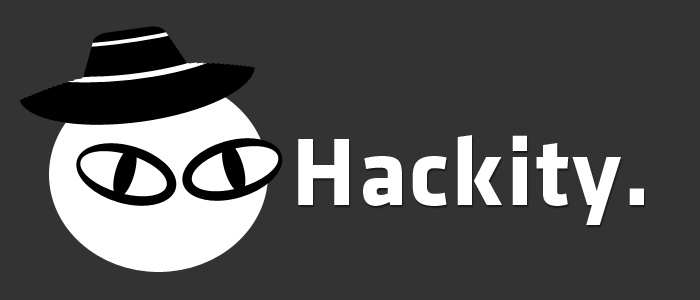
<style>
.page{position:relative;width:700px;height:300px;background:#333333}
.page>*{position:absolute;margin:0}
.t1{font:99px "Klavika-Bold";letter-spacing:0.02em;color:#ffffff}
</style>
<div class="page">
<p class="t1" style="left:298px;top:135px;width:346px;height:90px">Hackity.</p>
</div>
